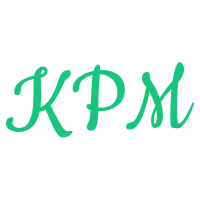
<style>
.page{position:relative;width:200px;height:200px;background:#ffffff}
.page>*{position:absolute;margin:0}
.t1{font:100px "Cookie-Regular";color:#17c57d;text-transform:uppercase}
</style>
<div class="page">
<p class="t1" style="left:6px;top:62px;width:188px;height:76px">KPM</p>
</div>
